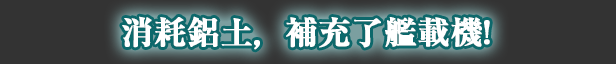
<style>
.page{position:relative;width:616px;height:64px;background:#333333}
.page>*{position:absolute;margin:0}
.t1{font:32px "RyuminPr6N-ExBold";color:#ffffff;font-weight:bold}
</style>
<div class="page">
<p class="t1" style="left:122px;top:16px;width:368px;height:34px">消耗鋁土，補充了艦載機!</p>
</div>
